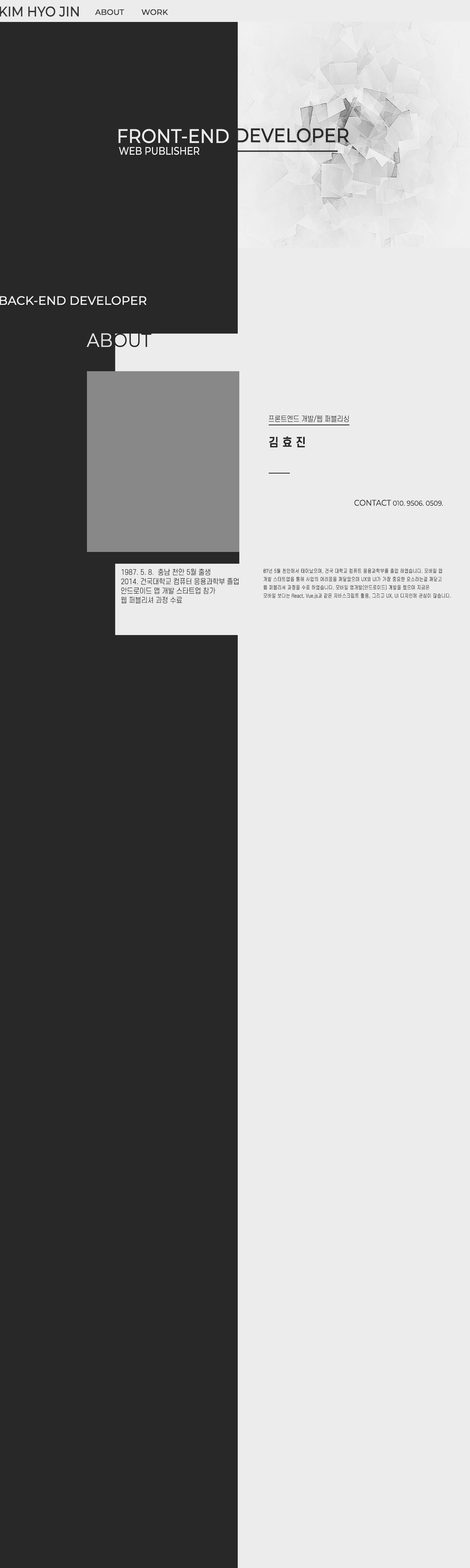
<style>
.page{position:relative;width:470px;height:1568px;background:#282828}
.page>*{position:absolute;margin:0}
.t1{font:14.1px "Montserrat-Medium";color:#343434;scale:0.9 1}
.t2{font:7.8px "Montserrat-Medium";color:#343434}
.t3{font:19.6px "Montserrat-Medium";color:#ececec;scale:0.92 1}
.t4{font:19.6px "Montserrat-Medium";color:#282828;scale:0.92 1}
.t5{font:11px "Montserrat-Medium";color:#ececec;scale:0.84 1}
.t6{font:12.2px "Montserrat-Medium";color:#ececec}
.t7{font:7.1px "S-CoreDream-3Light";color:#282828;scale:0.92 1}
.t8{font:11.4px "S-CoreDream-6Bold";letter-spacing:0.34em;color:#282828;scale:0.92 1}
.t9{font:7.1px "Montserrat-Regular";color:#282828;scale:0.92 1}
.t10{font:8.2px "Montserrat-Regular";color:#282828;scale:0.92 1}
.t11{font:7.1px/9.3px "S-CoreDream-3Light";color:#282828;scale:0.92 1}
.t12{font:5.6px/8.3px "Gulim";color:#282828;scale:0.77 1}
.t13{font:5.6px/8.3px "Montserrat-Regular";color:#282828;scale:0.77 1}
</style>
<div class="page">
<p class="t1" style="left:0px;top:6px;width:79px;height:11px">KIM HYO JIN</p>
<p class="t2" style="left:95px;top:9px;width:29px;height:6px">ABOUT</p>
<p class="t2" style="left:142px;top:9px;width:26px;height:6px">WORK</p>
<p class="t3" style="left:118px;top:129px;width:111px;height:14px">FRONT-END</p>
<p class="t4" style="left:236px;top:128px;width:113px;height:15px">DEVELOPER</p>
<p class="t5" style="left:119px;top:147px;width:81px;height:8px">WEB PUBLISHER</p>
<p class="t6" style="left:0px;top:296px;width:147px;height:9px">BACK-END DEVELOPER</p>
<p class="t7" style="left:269px;top:415px;width:80px;height:7px">프론트엔드 개발/웹 퍼블리싱</p>
<p class="t8" style="left:269px;top:436px;width:36px;height:12px">김효진</p>
<p class="t9" style="left:355px;top:500px;width:88px;height:6px"><span class="t10">CONTACT</span> 010. 9506. 0509.</p>
<p class="t11" style="left:121px;top:568px;width:118px;height:36px">1987. 5. 8.  충남 천안 5월 출생 <br>2014. 건국대학교 컴퓨터 응용과학부 졸업<br>안드로이드 앱 개발 스타트업 참가<br>웹 퍼블리셔 과정 수료</p>
<p class="t12" style="left:263px;top:568px;width:188px;height:31px"><span class="t13">87</span>년 5월 천안에서 태어났으며, 건국 대학교 컴퓨트 응용과학부를 졸업 하였습니다. 모바일 앱<br>개발 스타트업을 통해 사업의 어려움을 깨달았으며 UX와 UI가 가장 중요한 요소라는걸 깨닫고 <br>웹 퍼블리셔 과정을 수료 하였습니다. 모바일 앱개발(안드로이드) 개발을 했으며 지금은 <br>모바일 보다는 React, Vue.js과 같은 자바스크립트 활용, 그리고 UX, UI 디자인에 관심이 많습니다.</p>
</div>
